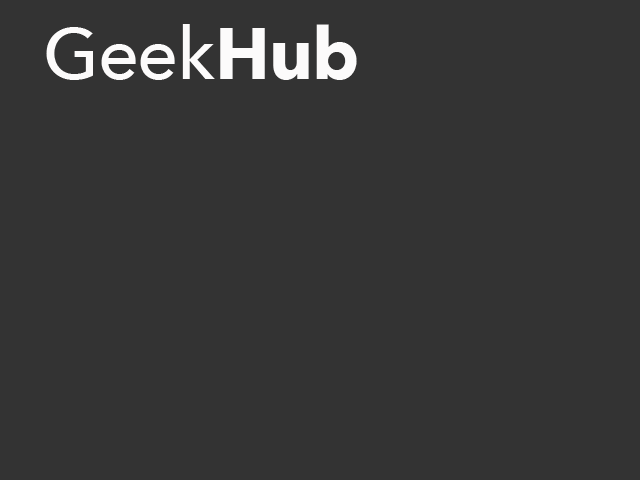
<style>
.page{position:relative;width:640px;height:480px;background:#333333}
.page>*{position:absolute;margin:0}
.t1{font:72px "AvenirNext-Medium";color:#fcfbfb}
.t2{font:72px "AvenirNext-Bold";color:#fcfbfb}
</style>
<div class="page">
<p class="t1" style="left:46px;top:24px;width:311px;height:56px">Geek<span class="t2">Hub</span></p>
</div>
